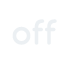
<style>
.page{position:relative;width:68px;height:68px;background:#ffffff}
.page>*{position:absolute;margin:0}
.t1{font:32.1px "Comfortaa-Bold";color:#ecf0f3}
</style>
<div class="page">
<p class="t1" style="left:12px;top:19px;width:45px;height:26px">off</p>
</div>
